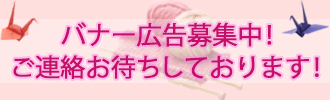
<style>
.page{position:relative;width:330px;height:100px;background:#ffdede}
.page>*{position:absolute;margin:0}
.t1{font:25px "KozGoPr6N-Regular";letter-spacing:-0.03em;color:#c50f69;font-weight:bold}
</style>
<div class="page">
<p class="t1" style="left:61px;top:22px;width:211px;height:25px">バナー広告募集中！</p>
<p class="t1" style="left:13px;top:55px;width:306px;height:24px">ご連絡お待ちしております！</p>
</div>
